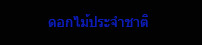
<style>
.page{position:relative;width:202px;height:45px;background:#020202}
.page>*{position:absolute;margin:0}
.t1{font:14px "Tahoma";color:#0d1db5}
</style>
<div class="page">
<p class="t1" style="left:48px;top:14px;width:100px;height:13px">ดอกไม้ประจำชาติ</p>
</div>
